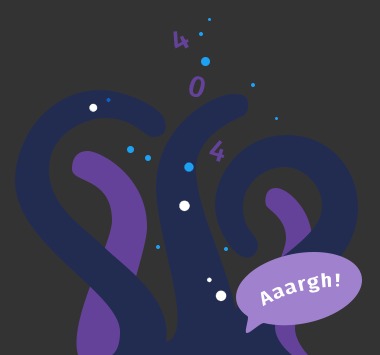
<style>
.page{position:relative;width:380px;height:355px;background:#333333}
.page>*{position:absolute;margin:0}
.t1{font:30px "FiraSans-Medium";color:#65429a}
.t2{font:18px "FiraSans-SemiBold";letter-spacing:0.1em;color:#ffffff}
</style>
<div class="page">
<p class="t1" style="left:173px;top:31px;width:16px;height:18px;rotate:-28deg">4</p>
<p class="t1" style="left:189px;top:76px;width:16px;height:21px;rotate:16deg">0</p>
<p class="t1" style="left:209px;top:140px;width:16px;height:22px;rotate:17deg">4</p>
<p class="t2" style="left:260px;top:273px;width:80px;height:34px;rotate:-12deg">Aaargh!</p>
</div>
